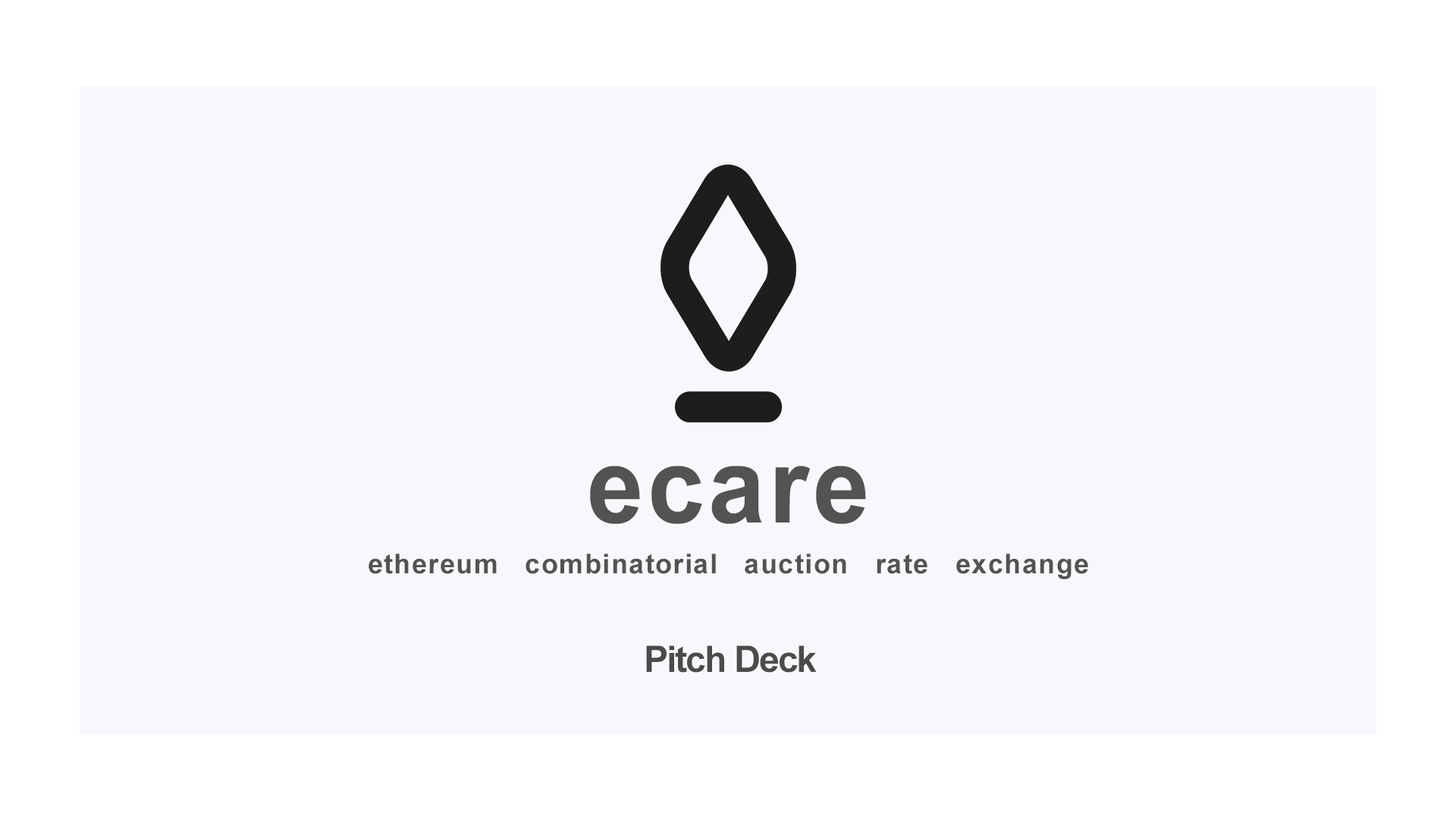
<style>
.page{position:relative;width:1456px;height:819px;background:#f8f8fc}
.page>*{position:absolute;margin:0}
.t1{font:106.2px "Arial-BoldMT";letter-spacing:0.04em;color:#535353;scale:0.96 1}
.t2{font:27.3px "Arial-BoldMT";letter-spacing:0.04em;color:#535353}
.t3{font:36.4px "Arial-BoldMT";letter-spacing:-0.04em;color:#4b4b4b}
</style>
<div class="page">
<p class="t1" style="left:590px;top:466px;width:276px;height:58px">ecare</p>
<p class="t2" style="left:369px;top:554px;width:719px;height:25px">ethereum   combinatorial   auction   rate   exchange</p>
<p class="t3" style="left:646px;top:645px;width:171px;height:28px">Pitch Deck</p>
</div>
